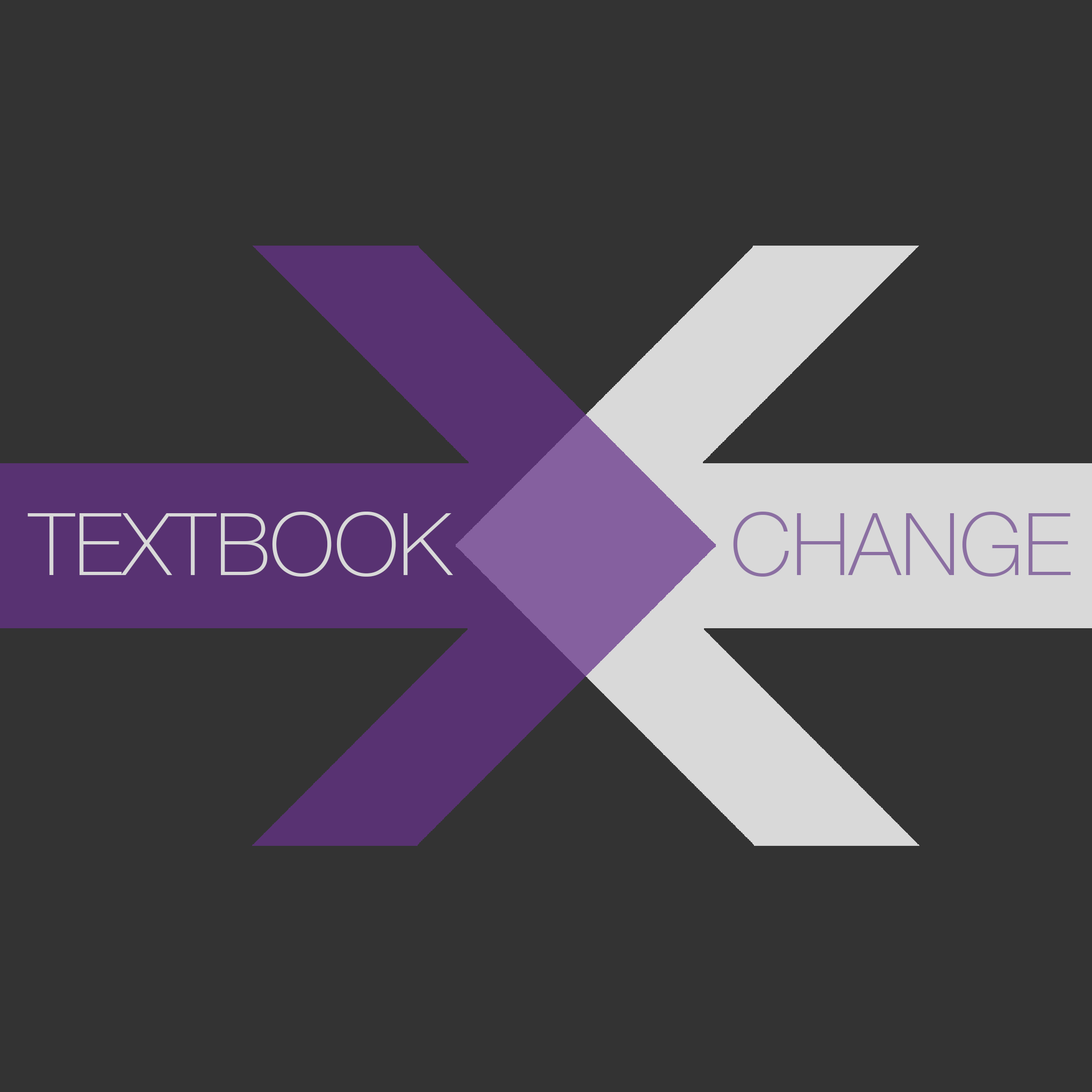
<style>
.page{position:relative;width:1092px;height:1092px;background:#333333}
.page>*{position:absolute;margin:0}
.t1{font:86.5px "HelveticaNeue-Thin";color:#d9d9d9;text-transform:uppercase}
.t2{font:86.5px "HelveticaNeue-Thin";color:#8b6fa2;text-transform:uppercase}
</style>
<div class="page">
<p class="t1" style="left:27px;top:512px;width:426px;height:65px">TEXTBOOK</p>
<p class="t2" style="left:733px;top:512px;width:338px;height:65px">CHANGE</p>
</div>
